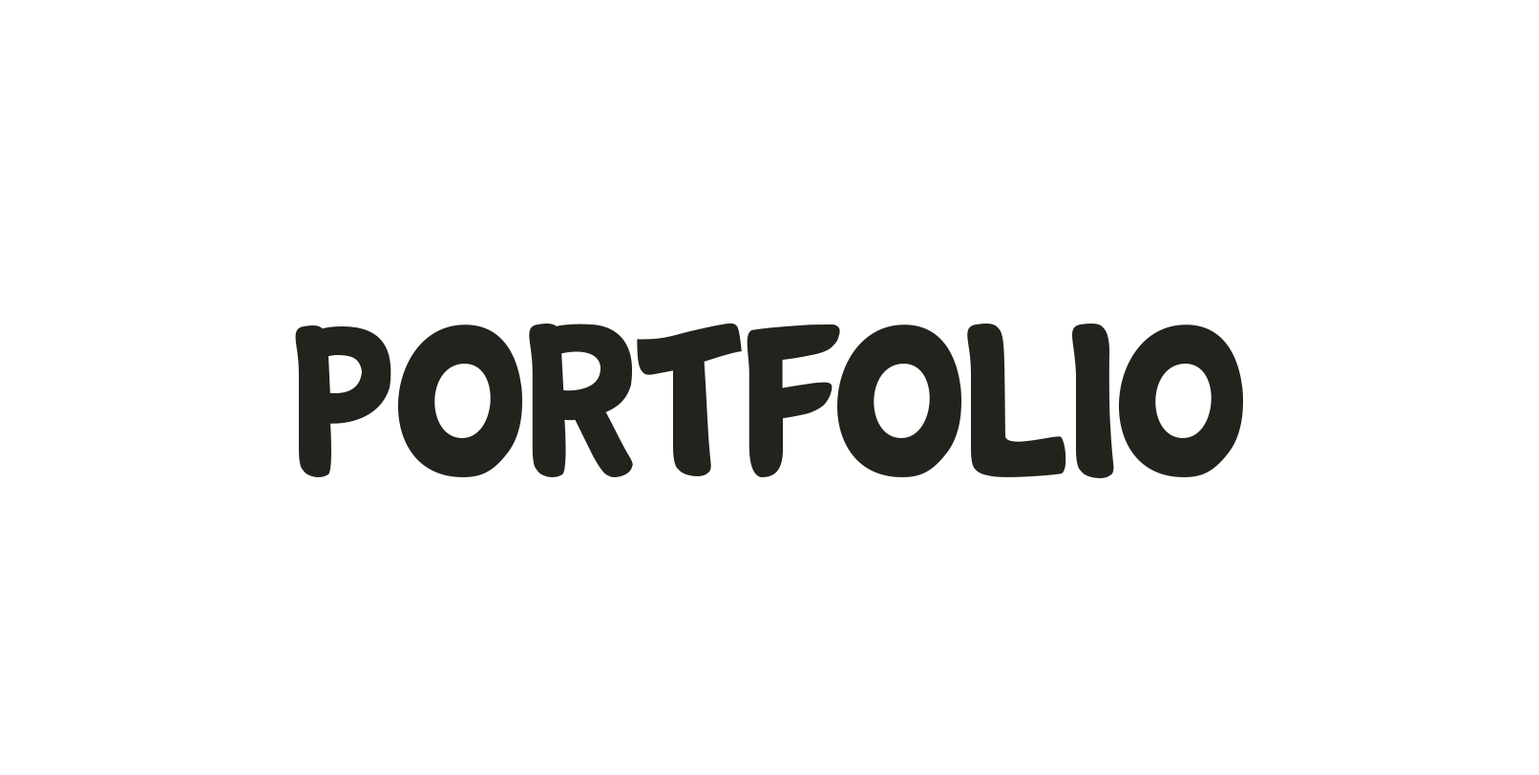
<style>
.page{position:relative;width:1539px;height:775px;background:#ffffff}
.page>*{position:absolute;margin:0}
.t1{font:218.7px "Cartwheel";color:#23221d}
</style>
<div class="page">
<p class="t1" style="left:295px;top:323px;width:948px;height:155px">Portfolio</p>
</div>
